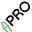
<style>
.page{position:relative;width:32px;height:32px;background:#ffffff}
.page>*{position:absolute;margin:0}
.t1{font:14px "HaloGrotesk-Regular";color:#000000}
.t2{font:14px "PinkMouseScript-Regular";color:#6cb670}
</style>
<div class="page">
<p class="t1" style="left:1px;top:1px;width:29px;height:32px;rotate:-45deg"><span class="t2">А</span>PRO</p>
</div>
